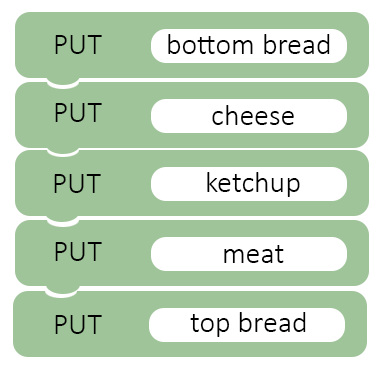
<style>
.page{position:relative;width:378px;height:368px;background:#a0c49a}
.page>*{position:absolute;margin:0}
.t1{font:30px "Calibri-Light";color:#000000}
</style>
<div class="page">
<p class="t1" style="left:55px;top:35px;width:47px;height:19px">PUT</p>
<p class="t1" style="left:168px;top:34px;width:162px;height:20px">bottom bread</p>
<p class="t1" style="left:55px;top:103px;width:47px;height:19px">PUT</p>
<p class="t1" style="left:212px;top:105px;width:82px;height:20px">cheese</p>
<p class="t1" style="left:54px;top:174px;width:47px;height:19px">PUT</p>
<p class="t1" style="left:207px;top:172px;width:93px;height:25px">ketchup</p>
<p class="t1" style="left:55px;top:242px;width:47px;height:19px">PUT</p>
<p class="t1" style="left:224px;top:245px;width:60px;height:18px">meat</p>
<p class="t1" style="left:55px;top:315px;width:47px;height:19px">PUT</p>
<p class="t1" style="left:190px;top:312px;width:116px;height:25px">top bread</p>
</div>
